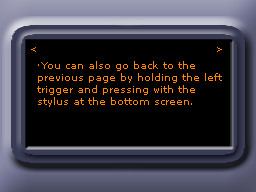
<style>
.page{position:relative;width:256px;height:192px;background:#000000}
.page>*{position:absolute;margin:0}
.t1{font:9px "MSReferenceSansSerif";color:#ff8400}
.t2{font:10px "MSReferenceSansSerif";color:#ff8400}
</style>
<div class="page">
<p class="t1" style="left:31px;top:47px;width:5px;height:5px">&lt;</p>
<p class="t1" style="left:217px;top:47px;width:5px;height:5px">&gt;</p>
<p class="t2" style="left:37px;top:61px;width:185px;height:46px">·You can also go back to the <br>previous page by holding the left<br>trigger and pressing with the <br>stylus at the bottom screen.</p>
</div>
